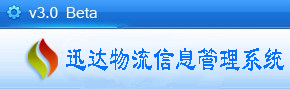
<style>
.page{position:relative;width:290px;height:89px}
.page>*{position:absolute;margin:0}
.t1{font:36px "LiSu";color:#0671f6;scale:0.6 1}
</style>
<div class="page">
<p class="t1" style="left:66px;top:48px;width:218px;height:23px">迅达物流信息管理系统</p>
</div>
